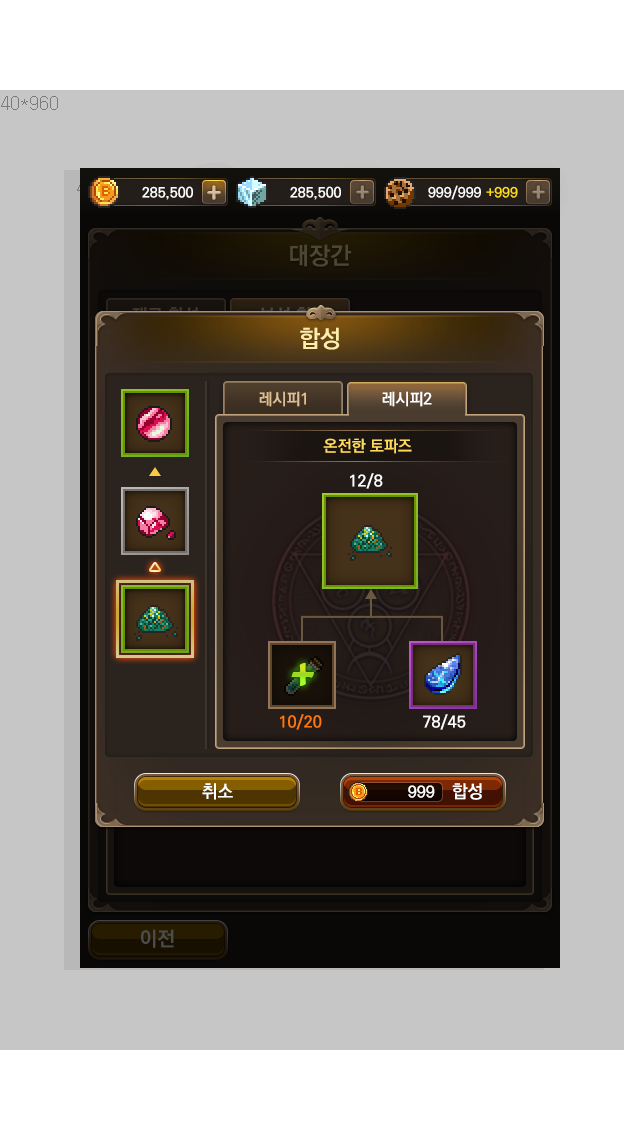
<style>
.page{position:relative;width:640px;height:1136px;background:#c6c6c6}
.page>*{position:absolute;margin:0}
.t1{font:24px "KoPubDotumBold";color:#4c4733}
.t2{font:24px "KoPubDotumBold";color:#ffedab}
.t3{font:16px "KoPubDotumBold";color:#e0c093}
.t4{font:16px "KoPubDotumBold";color:#ffffff}
.t5{font:16px "KoPubDotumBold";color:#ffda5b}
.t6{font:48px "CooperBlack";scale:0.96 1}
.t7{font:16px "KoPubDotumBold";color:#fe770c}
.t8{font:18px "KoPubDotumBold";color:#ffffff}
</style>
<div class="page">
<p class="t1" style="left:290px;top:244px;width:61px;height:23px">대장간</p>
<p class="t2" style="left:300px;top:327px;width:40px;height:23px">합성</p>
<p class="t3" style="left:259px;top:391px;width:47px;height:16px">레시피1</p>
<p class="t4" style="left:382px;top:391px;width:50px;height:16px">레시피2</p>
<p class="t5" style="left:323px;top:438px;width:89px;height:16px">온전한 토파즈</p>
<p class="t4" style="left:350px;top:473px;width:33px;height:16px">12/8</p>
<p class="t6" style="left:291px;top:663px;width:23px;height:23px">+</p>
<p class="t6" style="left:291px;top:663px;width:23px;height:23px">+</p>
<p class="t7" style="left:280px;top:714px;width:42px;height:16px">10/20</p>
<p class="t4" style="left:423px;top:714px;width:43px;height:16px">78/45</p>
<p class="t8" style="left:202px;top:783px;width:31px;height:17px">취소</p>
<p class="t4" style="left:408px;top:785px;width:27px;height:13px">999</p>
<p class="t8" style="left:452px;top:783px;width:30px;height:17px">합성</p>
</div>
